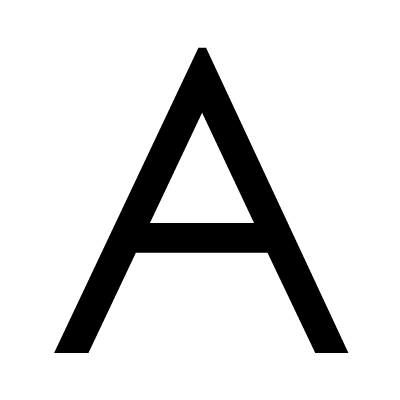
<style>
.page{position:relative;width:400px;height:400px;background:#ffffff}
.page>*{position:absolute;margin:0}
.t1{font:424.8px "CenturyGothic";color:#000000}
</style>
<div class="page">
<p class="t1" style="left:54px;top:47px;width:295px;height:306px">A</p>
</div>
